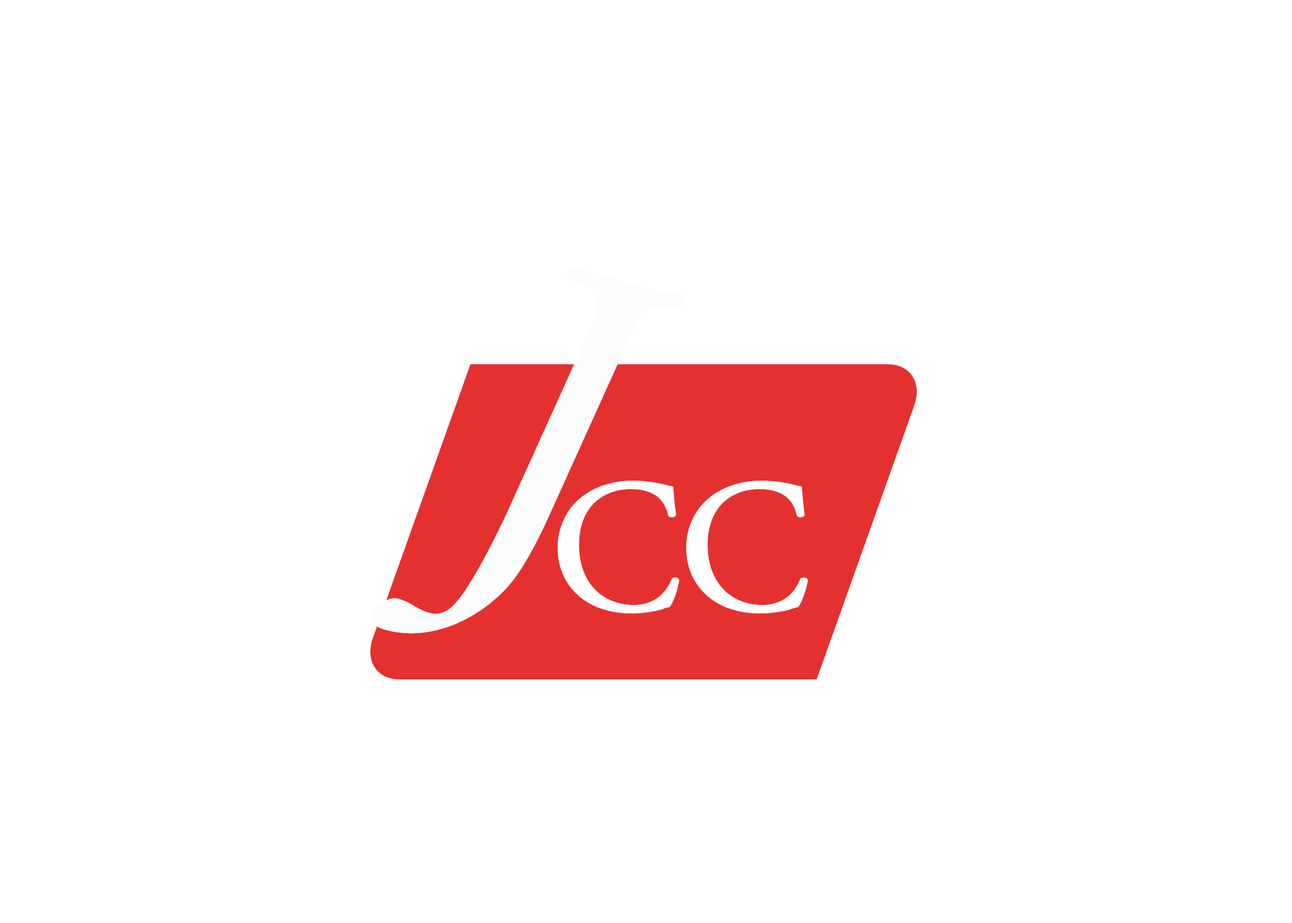
<style>
.page{position:relative;width:1292px;height:923px;background:#ffffff}
.page>*{position:absolute;margin:0}
.t1{font:457.7px "AGaramondPro-Regular";color:#fbfdfd;font-weight:bold;font-style:italic}
.t2{font:188.3px "AGaramondPro-Regular";color:#ffffff;font-weight:bold}
.t3{font:188.3px "AGaramondPro-Regular";color:#feffff;font-weight:bold}
</style>
<div class="page">
<p class="t1" style="left:370px;top:266px;width:316px;height:368px;rotate:14deg">J</p>
<p class="t2" style="left:557px;top:481px;width:122px;height:132px">C</p>
<p class="t3" style="left:686px;top:481px;width:122px;height:132px">C</p>
</div>
